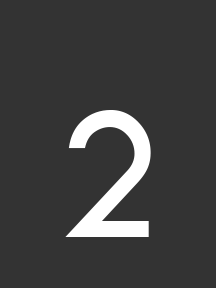
<style>
.page{position:relative;width:216px;height:288px;background:#333333}
.page>*{position:absolute;margin:0}
.t1{font:196px "TwCenMT-Regular";color:#ffffff}
</style>
<div class="page">
<p class="t1" style="left:65px;top:110px;width:86px;height:127px">2</p>
</div>
